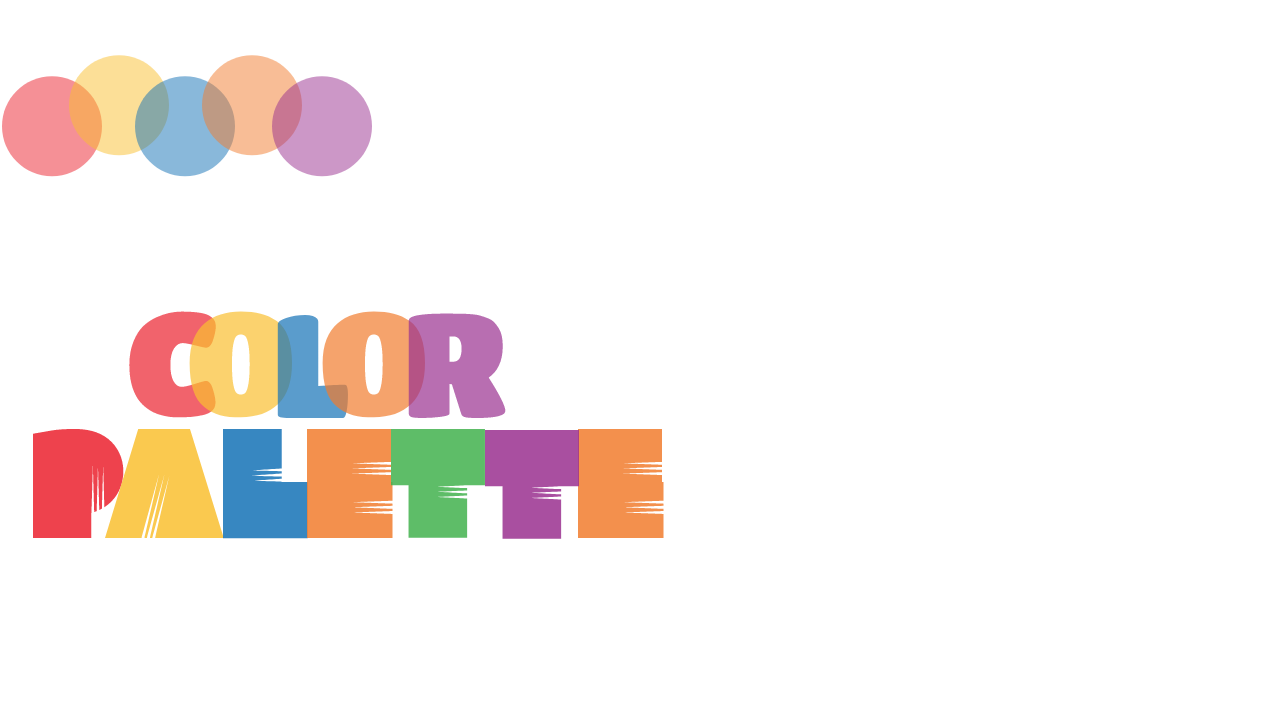
<style>
.page{position:relative;width:1280px;height:720px;background:#ffffff}
.page>*{position:absolute;margin:0}
.t1{font:145px "Clutchee";color:#ee424d}
.t2{font:145px "Clutchee";color:#fac94f}
.t3{font:145px "Clutchee";color:#3787c1}
.t4{font:145px "Clutchee";color:#f3904d}
.t5{font:145px "Clutchee";color:#5ebd68}
.t6{font:145px "Clutchee";color:#a94fa0}
</style>
<div class="page">
<p class="t1" style="left:33px;top:428px;width:91px;height:110px">P</p>
<p class="t2" style="left:105px;top:429px;width:119px;height:109px">A</p>
<p class="t3" style="left:223px;top:428px;width:85px;height:111px">L</p>
<p class="t4" style="left:307px;top:428px;width:86px;height:110px">E</p>
<p class="t5" style="left:391px;top:428px;width:94px;height:110px">T</p>
<p class="t6" style="left:485px;top:429px;width:94px;height:110px">T</p>
<p class="t4" style="left:578px;top:428px;width:86px;height:110px">E</p>
</div>
